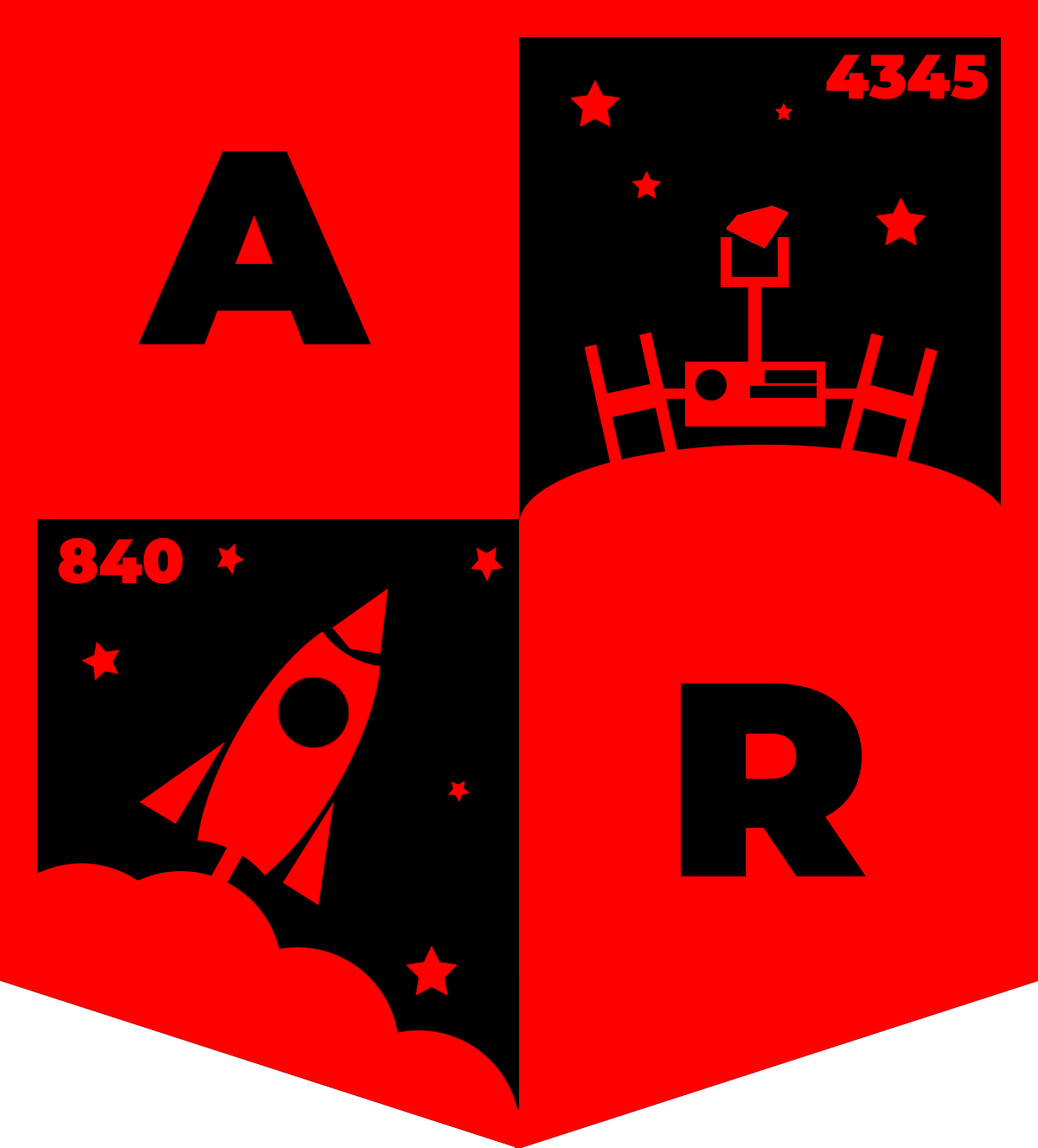
<style>
.page{position:relative;width:1038px;height:1148px;background:#ff0000}
.page>*{position:absolute;margin:0}
.t1{font:61.3px "Montserrat-Black";color:#ff0000}
.t2{font:275.7px "Montserrat-Black";color:#000000}
</style>
<div class="page">
<p class="t1" style="left:826px;top:55px;width:162px;height:45px">4345</p>
<p class="t2" style="left:138px;top:151px;width:233px;height:193px">A</p>
<p class="t1" style="left:58px;top:538px;width:125px;height:46px">840</p>
<p class="t2" style="left:681px;top:683px;width:185px;height:194px">R</p>
</div>
